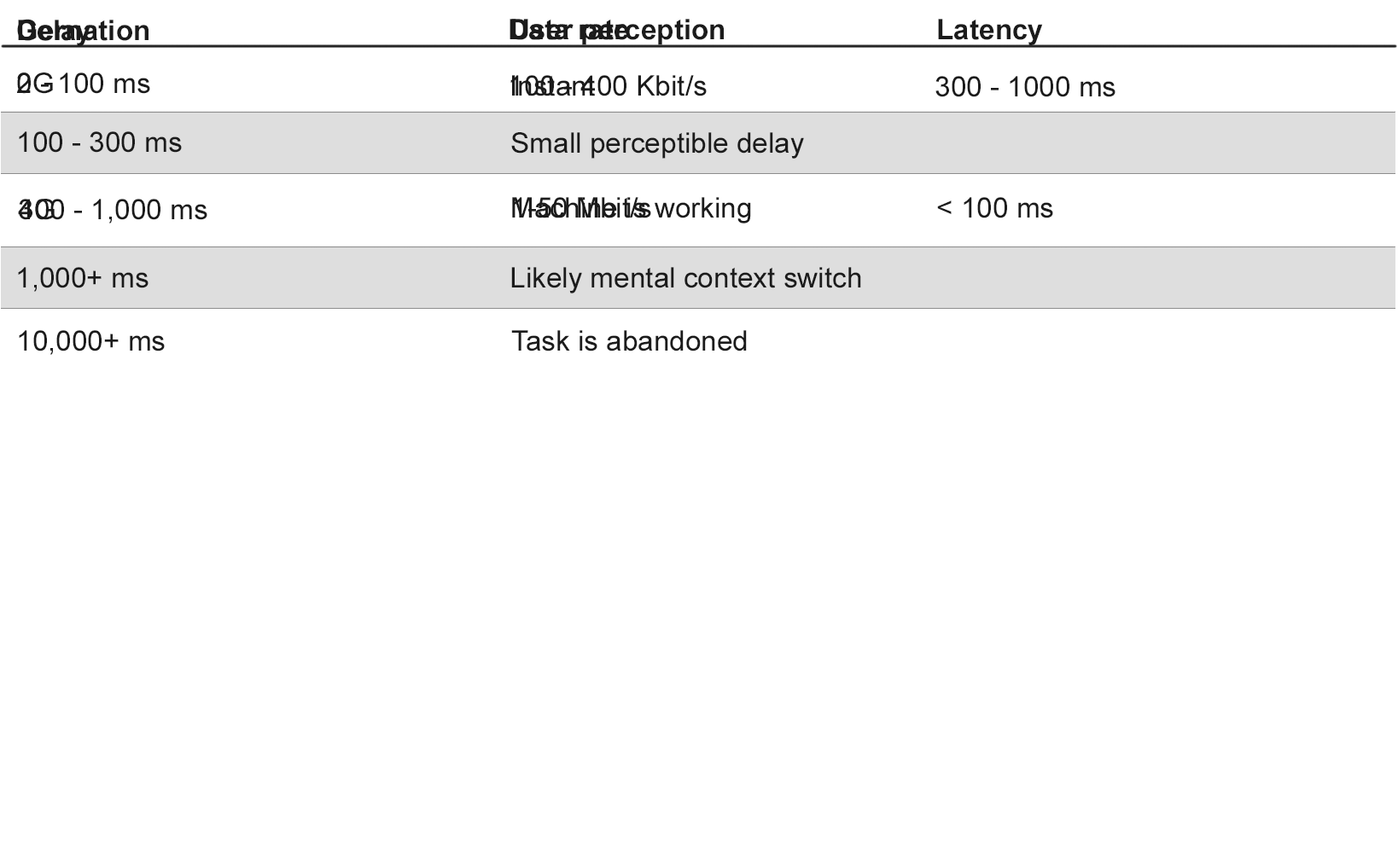
<style>
.page{position:relative;width:1398px;height:853px;background:#ffffff}
.page>*{position:absolute;margin:0}
.t1{font:28.4px "Arial-BoldMT";color:#1b1b1b}
.t2{font:28.4px "ArialMT";color:#1b1b1b}
</style>
<div class="page">
<p class="t1" style="left:17px;top:19px;width:131px;height:22px">Gernation</p>
<p class="t1" style="left:18px;top:20px;width:73px;height:26px">Delay</p>
<p class="t1" style="left:509px;top:19px;width:120px;height:21px">Data rate</p>
<p class="t1" style="left:511px;top:19px;width:213px;height:26px">User perception</p>
<p class="t1" style="left:938px;top:19px;width:105px;height:26px">Latency</p>
<p class="t2" style="left:17px;top:73px;width:36px;height:21px">2G</p>
<p class="t2" style="left:17px;top:73px;width:133px;height:21px">0 - 100 ms</p>
<p class="t2" style="left:510px;top:75px;width:196px;height:21px">100 - 400 Kbit/s</p>
<p class="t2" style="left:512px;top:75px;width:83px;height:21px">Instant</p>
<p class="t2" style="left:935px;top:76px;width:180px;height:21px">300 - 1000 ms</p>
<p class="t2" style="left:19px;top:131px;width:163px;height:22px">100 - 300 ms</p>
<p class="t2" style="left:511px;top:132px;width:293px;height:27px">Small perceptible delay</p>
<p class="t2" style="left:512px;top:197px;width:239px;height:27px">Machine is working</p>
<p class="t2" style="left:514px;top:197px;width:137px;height:21px">1-50 Mbit/s</p>
<p class="t2" style="left:937px;top:197px;width:116px;height:21px">&lt; 100 ms</p>
<p class="t2" style="left:18px;top:199px;width:37px;height:21px">4G</p>
<p class="t2" style="left:19px;top:199px;width:188px;height:25px">300 - 1,000 ms</p>
<p class="t2" style="left:18px;top:267px;width:130px;height:25px">1,000+ ms</p>
<p class="t2" style="left:511px;top:267px;width:350px;height:27px">Likely mental context switch</p>
<p class="t2" style="left:19px;top:330px;width:146px;height:25px">10,000+ ms</p>
<p class="t2" style="left:511px;top:330px;width:236px;height:22px">Task is abandoned</p>
</div>
